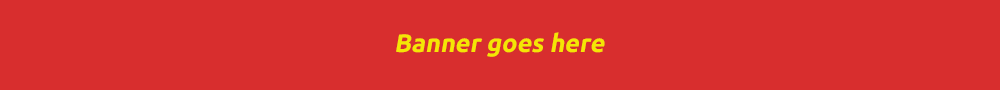
<style>
.page{position:relative;width:1000px;height:90px;background:#d82e2e}
.page>*{position:absolute;margin:0}
.t1{font:25.2px "Ubuntu-Bold";color:#f4e604;font-style:italic}
</style>
<div class="page">
<p class="t1" style="left:396px;top:32px;width:209px;height:25px">Banner goes here</p>
</div>
